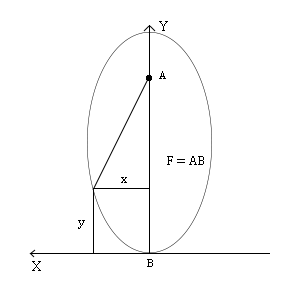
<style>
.page{position:relative;width:300px;height:300px;background:#ffffff}
.page>*{position:absolute;margin:0}
.t1{font:28px "CambriaMath";color:#000000}
.t2{font:21px "CambriaMath";color:#000000}
.t3{font:23px "CambriaMath";color:#000000}
</style>
<div class="page">
<p class="t1" style="left:159px;top:21px;width:9px;height:10px">Y</p>
<p class="t2" style="left:159px;top:71px;width:7px;height:8px">A</p>
<p class="t3" style="left:167px;top:156px;width:37px;height:9px">F = AB</p>
<p class="t3" style="left:121px;top:177px;width:6px;height:6px">x</p>
<p class="t3" style="left:78px;top:220px;width:7px;height:9px">y</p>
<p class="t1" style="left:32px;top:261px;width:9px;height:10px">X</p>
<p class="t2" style="left:147px;top:259px;width:6px;height:8px">B</p>
</div>
